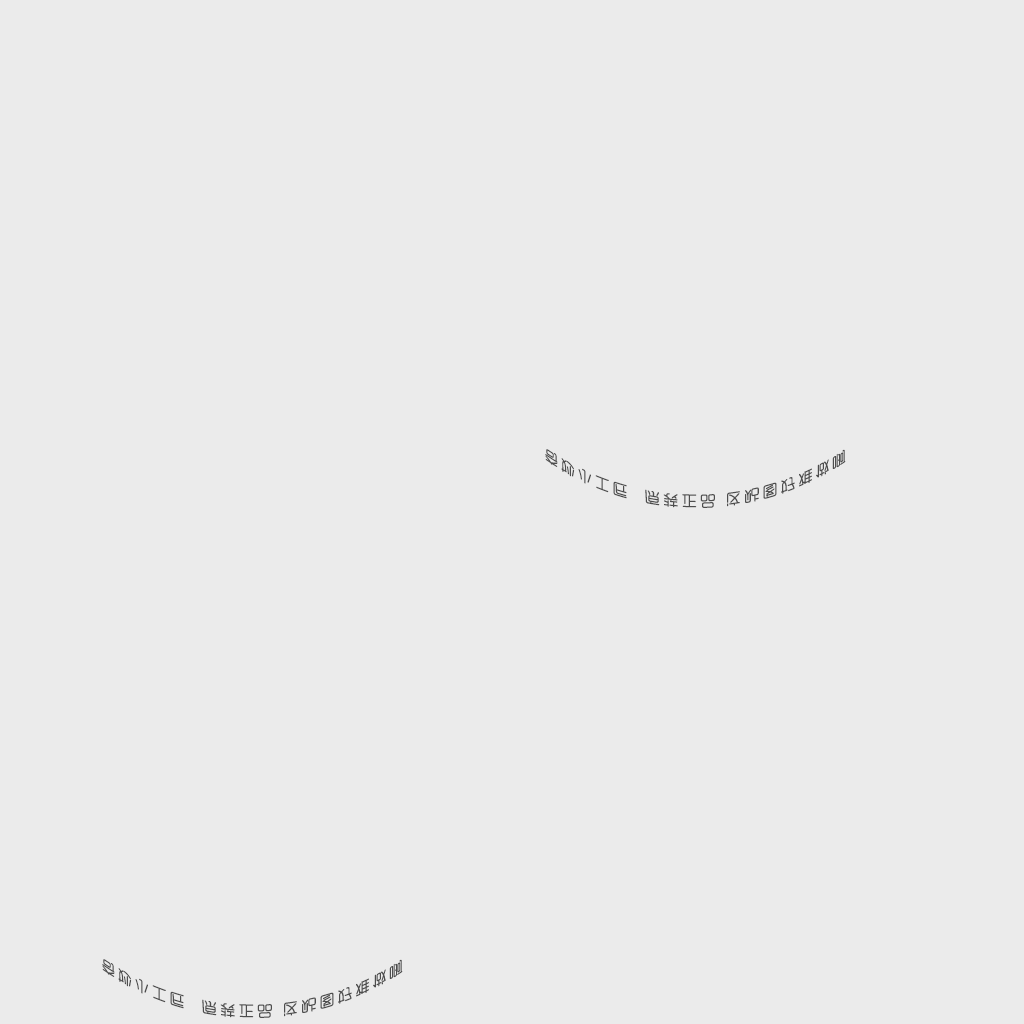
<style>
.page{position:relative;width:1024px;height:1024px;background:#ebebeb}
.page>*{position:absolute;margin:0}
.t1{font:14.8px "MFYueYuan_Noncommercial-Regular";letter-spacing:0.2em;color:#4d4d4d}
</style>
<div class="page">
<p class="t1" style="left:545px;top:449px;width:301px;height:59px;text-align:center">奇妙小工匠  原装正品 这贴图好难做啊</p>
<p class="t1" style="left:102px;top:959px;width:301px;height:59px;text-align:center">奇妙小工匠  原装正品 这贴图好难做啊</p>
</div>
